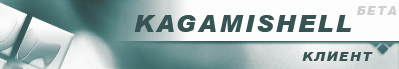
<style>
.page{position:relative;width:399px;height:69px;background:#fdfdfd}
.page>*{position:absolute;margin:0}
.t1{font:12px "ArialBlackCyrIt-Italic";letter-spacing:0.098em;color:#cfcfcf}
.t2{font:24px "ArialBlackCyrIt-Italic";letter-spacing:0.098em;color:#365454}
.t3{font:13.2px "ArialBlackCyrIt-Italic";letter-spacing:0.098em;color:#365454}
</style>
<div class="page">
<p class="t1" style="left:357px;top:6px;width:40px;height:9px">БЕТА</p>
<p class="t2" style="left:134px;top:15px;width:217px;height:17px">KAGAMISHELL</p>
<p class="t3" style="left:302px;top:51px;width:71px;height:10px">КЛИЕНТ</p>
</div>
